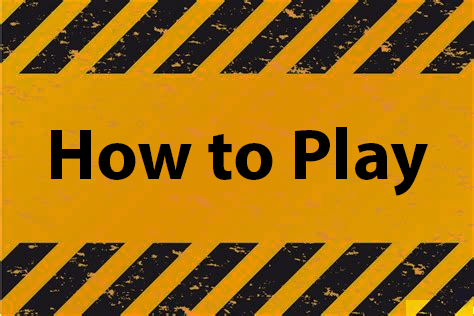
<style>
.page{position:relative;width:474px;height:316px}
.page>*{position:absolute;margin:0}
.t1{font:72.8px "MyriadPro-Bold";color:#000000}
</style>
<div class="page">
<p class="t1" style="left:51px;top:127px;width:377px;height:69px">How to Play</p>
</div>
